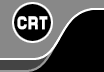
<style>
.page{position:relative;width:104px;height:72px;background:#000000}
.page>*{position:absolute;margin:0}
.t1{font:18.4px "MaximusCondensed-Bold";color:#ffffff;scale:1.34 1}
</style>
<div class="page">
<p class="t1" style="left:17px;top:16px;width:31px;height:14px">CRT</p>
</div>
